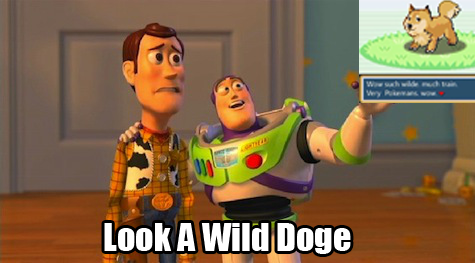
<style>
.page{position:relative;width:475px;height:263px}
.page>*{position:absolute;margin:0}
.t1{font:36px "Impact";color:#ffffff}
</style>
<div class="page">
<p class="t1" style="left:104px;top:223px;width:247px;height:31px">Look A Wild Doge</p>
</div>
